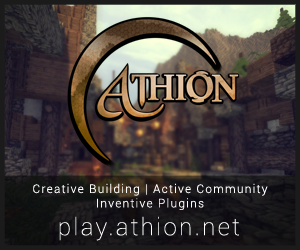
<style>
.page{position:relative;width:300px;height:250px}
.page>*{position:absolute;margin:0}
.t1{font:12px "Roboto-Light";letter-spacing:0.1em;color:#ffffff}
.t2{font:24px "Roboto-Thin";letter-spacing:0.1em;color:#ffffff}
</style>
<div class="page">
<p class="t1" style="left:33px;top:183px;width:235px;height:27px;text-align:center">Creative Building | Active Community<br>Inventive Plugins</p>
<p class="t2" style="left:59px;top:216px;width:180px;height:25px">play.athion.net</p>
</div>
